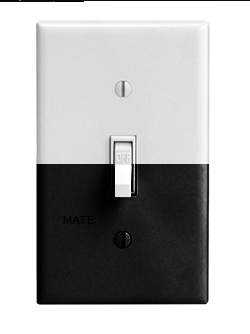
<style>
.page{position:relative;width:250px;height:334px;background:#ffffff}
.page>*{position:absolute;margin:0}
.t1{font:10.9px "Helvetica";letter-spacing:0.06em;color:#000000}
</style>
<div class="page">
<p class="t1" style="left:63px;top:215px;width:31px;height:8px">MATE</p>
</div>
